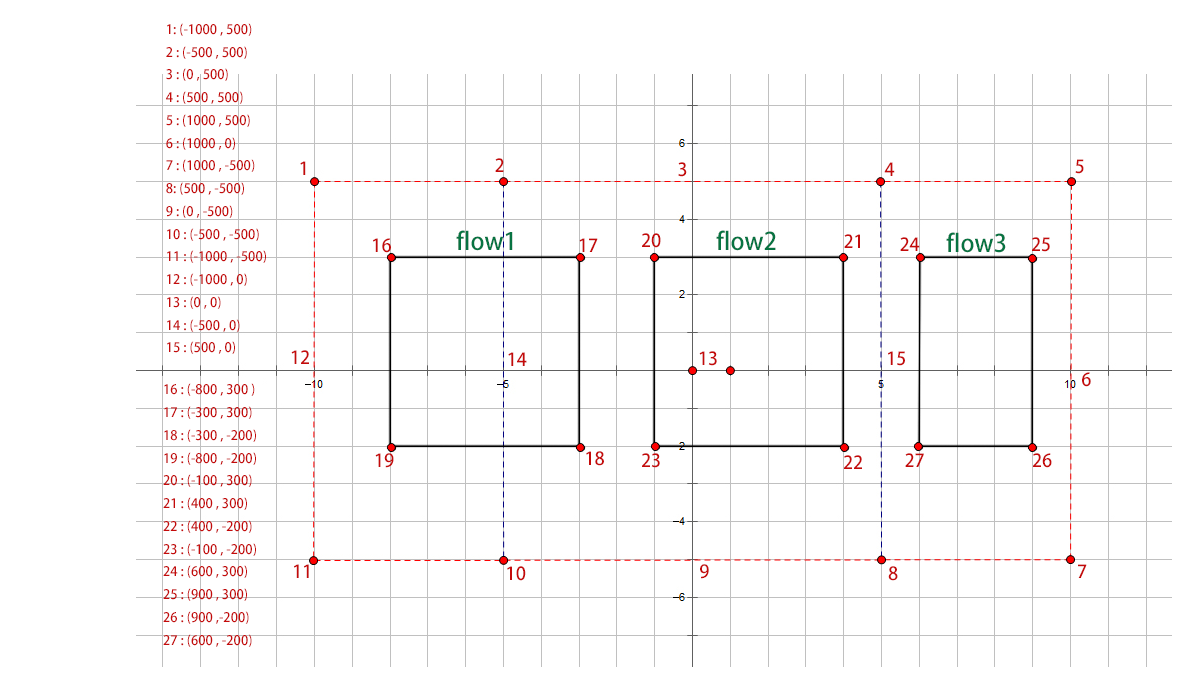
<style>
.page{position:relative;width:1200px;height:700px;background:#ffffff}
.page>*{position:absolute;margin:0}
.t1{font:13px "AdobeHeitiStd-Regular";color:#c40a0a}
.t2{font:18px "AdobeHeitiStd-Regular";color:#c40a0a}
.t3{font:24px "AdobeHeitiStd-Regular";color:#077342}
</style>
<div class="page">
<p class="t1" style="left:166px;top:23px;width:100px;height:331px">1: (-1000 , 500)<br>2 : (-500 , 500)<br>3 : (0 , 500)<br>4 : (500 , 500)<br>5 : (1000 , 500)<br>6 : (1000 , 0)<br>7 : (1000 , -500)<br>8: (500 , -500)<br>9 : (0 , -500)<br>10 : (-500 , -500)<br>11 : (-1000 , -500)<br>12 : (-1000 , 0)<br>13 : (0 , 0)<br>14 : (-500 , 0)<br>15 : (500 , 0)</p>
<p class="t2" style="left:300px;top:161px;width:6px;height:14px">1</p>
<p class="t2" style="left:495px;top:158px;width:9px;height:14px">2</p>
<p class="t2" style="left:1075px;top:159px;width:9px;height:15px">5</p>
<p class="t2" style="left:678px;top:162px;width:9px;height:15px">3</p>
<p class="t2" style="left:884px;top:162px;width:11px;height:14px">4</p>
<p class="t3" style="left:456px;top:230px;width:57px;height:21px">flow1</p>
<p class="t2" style="left:642px;top:233px;width:19px;height:15px">20</p>
<p class="t3" style="left:716px;top:230px;width:60px;height:21px">flow2</p>
<p class="t3" style="left:946px;top:232px;width:60px;height:21px">flow3</p>
<p class="t2" style="left:373px;top:238px;width:18px;height:15px">16</p>
<p class="t2" style="left:579px;top:238px;width:19px;height:14px">17</p>
<p class="t2" style="left:844px;top:234px;width:16px;height:14px">21</p>
<p class="t2" style="left:900px;top:237px;width:20px;height:14px">24</p>
<p class="t2" style="left:1032px;top:237px;width:18px;height:15px">25</p>
<p class="t2" style="left:291px;top:350px;width:18px;height:14px">12</p>
<p class="t2" style="left:508px;top:352px;width:19px;height:14px">14</p>
<p class="t2" style="left:699px;top:351px;width:18px;height:15px">13</p>
<p class="t2" style="left:888px;top:351px;width:17px;height:15px">15</p>
<p class="t2" style="left:1082px;top:372px;width:9px;height:15px">6</p>
<p class="t1" style="left:163px;top:383px;width:93px;height:264px">16 : (-800 , 300 )<br>17 : (-300 , 300)<br>18 : (-300 , -200)<br>19 : (-800 , -200)<br>20 : (-100 , 300)<br>21 : (400 , 300)<br>22 : (400 , -200)<br>23 : (-100 , -200)<br>24 : (600 , 300)<br>25 : (900 , 300)<br>26 : (900 ,-200)<br>27 : (600 , -200)</p>
<p class="t2" style="left:375px;top:453px;width:19px;height:15px">19</p>
<p class="t2" style="left:586px;top:451px;width:18px;height:15px">18</p>
<p class="t2" style="left:642px;top:453px;width:18px;height:15px">23</p>
<p class="t2" style="left:844px;top:455px;width:18px;height:14px">22</p>
<p class="t2" style="left:905px;top:453px;width:19px;height:14px">27</p>
<p class="t2" style="left:1033px;top:453px;width:19px;height:15px">26</p>
<p class="t2" style="left:294px;top:564px;width:15px;height:14px">11</p>
<p class="t2" style="left:507px;top:566px;width:19px;height:15px">10</p>
<p class="t2" style="left:700px;top:564px;width:9px;height:15px">9</p>
<p class="t2" style="left:888px;top:566px;width:10px;height:15px">8</p>
<p class="t2" style="left:1078px;top:564px;width:9px;height:14px">7</p>
</div>
